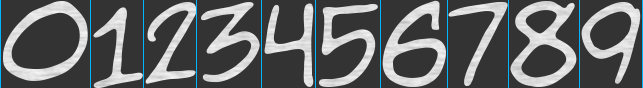
<style>
.page{position:relative;width:643px;height:88px;background:#333333}
.page>*{position:absolute;margin:0}
.t1{font:144px "NightwatcherBB";color:#dfdfdf}
</style>
<div class="page">
<p class="t1" style="left:3px;top:0px;width:638px;height:88px">0123456789</p>
</div>
